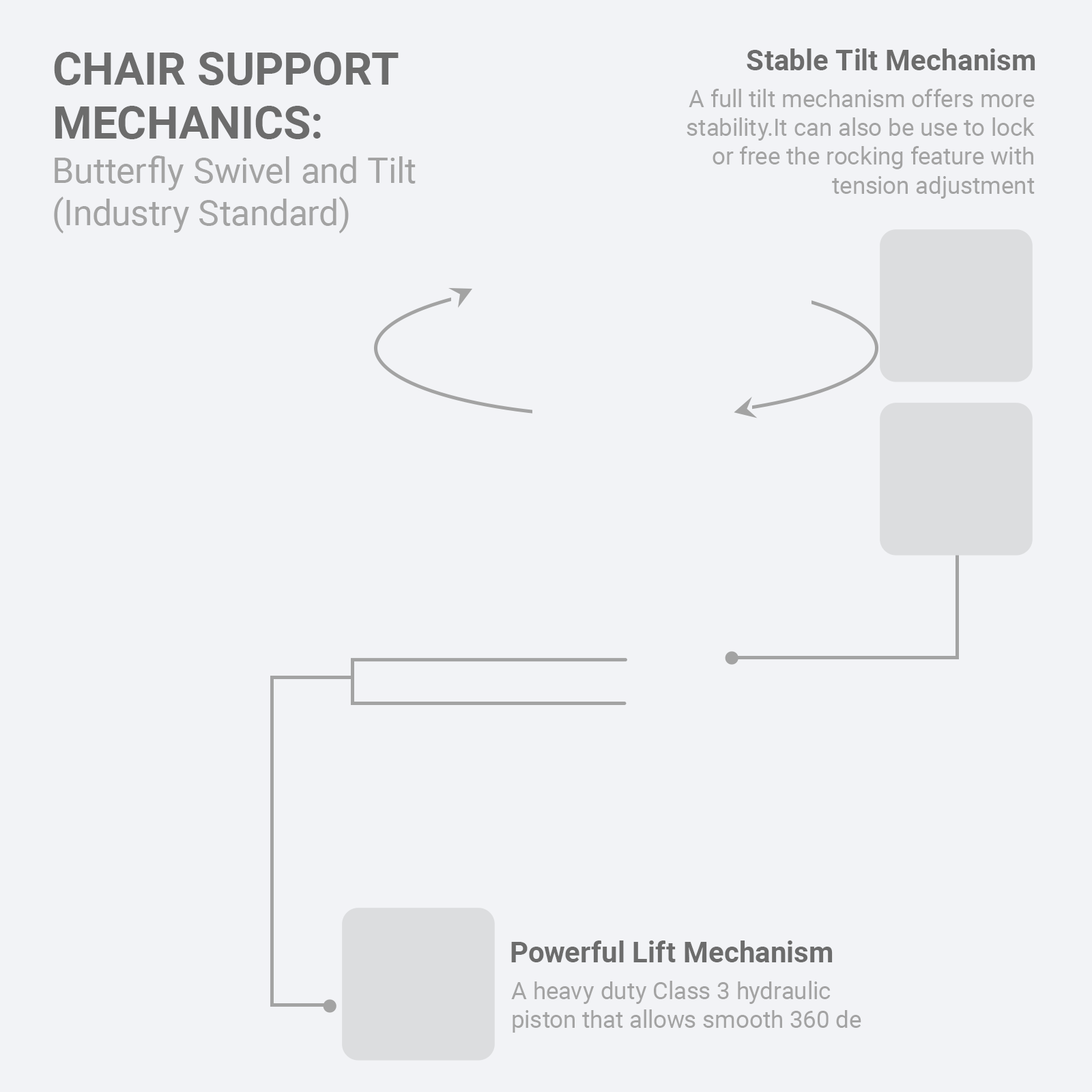
<style>
.page{position:relative;width:1092px;height:1092px;background:#f2f3f6}
.page>*{position:absolute;margin:0}
.t1{font:45.1px "Roboto-Bold";color:#6c6c6c}
.t2{font:28.8px "Roboto-Bold";color:#6c6c6c}
.t3{font:24px "Roboto-Regular";color:#a3a3a3}
.t4{font:35.3px "Roboto-Regular";color:#a3a3a3}
</style>
<div class="page">
<p class="t1" style="left:54px;top:52px;width:345px;height:87px">CHAIR SUPPORT<br>MECHANICS:</p>
<p class="t2" style="left:747px;top:48px;width:288px;height:22px">Stable Tilt Mechanism</p>
<p class="t3" style="left:687px;top:89px;width:348px;height:110px;text-align:right">A full tilt mechanism offers more stability.It can also be use to lock or free the rocking feature with tension adjustment</p>
<p class="t4" style="left:54px;top:156px;width:362px;height:77px">Butterfly Swivel and Tilt<br>(Industry Standard)</p>
<p class="t2" style="left:511px;top:940px;width:322px;height:22px">Powerful Lift Mechanism</p>
<p class="t3" style="left:511px;top:981px;width:350px;height:52px">A heavy duty Class 3 hydraulic piston that allows smooth 360 de</p>
</div>
